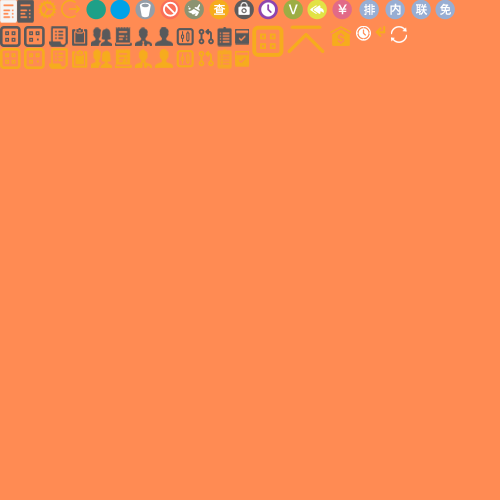
<style>
.page{position:relative;width:500px;height:500px;background:#ff8b53}
.page>*{position:absolute;margin:0}
.t1{font:12px "HiraginoSansGB-W6";color:#ffffff}
</style>
<div class="page">
<p class="t1" style="left:364px;top:4px;width:11px;height:11px">排</p>
<p class="t1" style="left:390px;top:3px;width:11px;height:12px">内</p>
<p class="t1" style="left:416px;top:4px;width:12px;height:11px">联</p>
<p class="t1" style="left:440px;top:3px;width:11px;height:12px">免</p>
</div>
